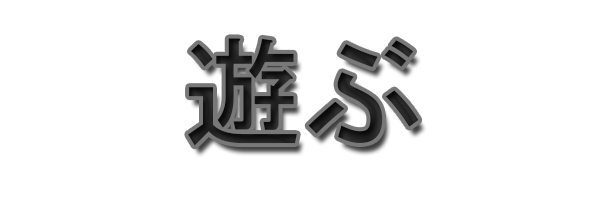
<style>
.page{position:relative;width:600px;height:200px;background:#ffffff}
.page>*{position:absolute;margin:0}
.t1{font:120px "MS-Gothic";color:#1e1e1e}
</style>
<div class="page">
<p class="t1" style="left:188px;top:38px;width:231px;height:108px">遊ぶ</p>
</div>
